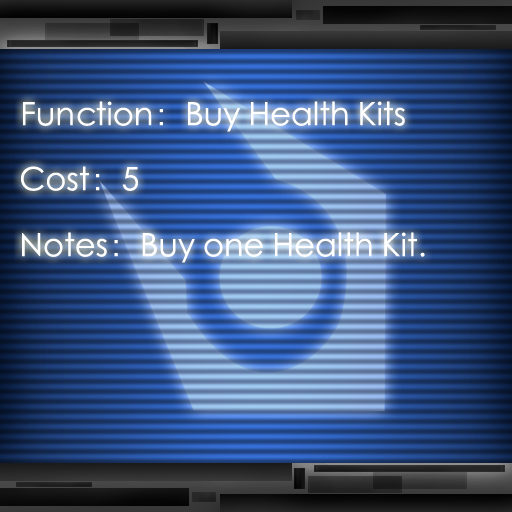
<style>
.page{position:relative;width:512px;height:512px}
.page>*{position:absolute;margin:0}
.t1{font:32px "STXihei";color:#ffffff}
</style>
<div class="page">
<p class="t1" style="left:23px;top:101px;width:382px;height:31px">Function：Buy Health Kits</p>
<p class="t1" style="left:21px;top:166px;width:117px;height:25px">Cost：5</p>
<p class="t1" style="left:22px;top:232px;width:403px;height:31px">Notes：Buy one Health Kit.</p>
</div>
